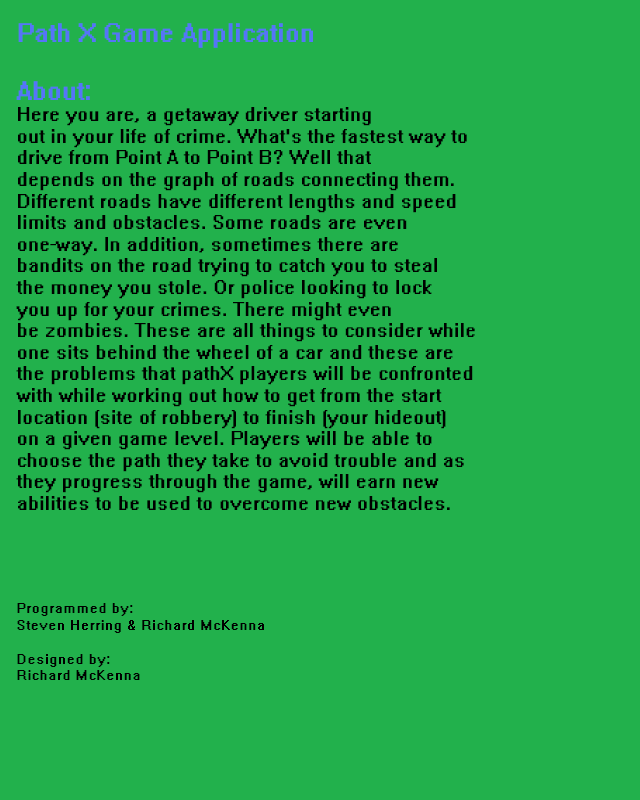
<style>
.page{position:relative;width:640px;height:800px;background:#22b14c}
.page>*{position:absolute;margin:0}
.t1{font:18px "System";color:#000000}
.t2{font:24px "System";color:#5674f8}
.t3{font:14px "System";color:#000000}
</style>
<div class="page">
<p class="t1" style="left:16px;top:23px;width:459px;height:657px"><span class="t2">Path X Game Application<br><br>About:<br></span>Here you are, a getaway driver starting <br>out in your life of crime. What's the fastest way to <br>drive from Point A to Point B? Well that <br>depends on the graph of roads connecting them. <br>Different roads have different lengths and speed <br>limits and obstacles. Some roads are even <br>one-way. In addition, sometimes there are <br>bandits on the road trying to catch you to steal <br>the money you stole. Or police looking to lock <br>you up for your crimes. There might even <br>be zombies. These are all things to consider while <br>one sits behind the wheel of a car and these are <br>the problems that pathX players will be confronted <br>with while working out how to get from the start <br>location (site of robbery) to finish (your hideout) <br>on a given game level. Players will be able to <br>choose the path they take to avoid trouble and as <br>they progress through the game, will earn new <br>abilities to be used to overcome new obstacles.<br><br><br><br><br><span class="t3">Programmed by:<br>Steven Herring &amp; Richard McKenna<br><br>Designed by:<br>Richard McKenna</span></p>
</div>
